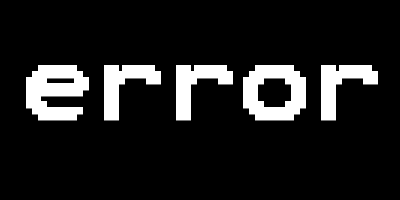
<style>
.page{position:relative;width:400px;height:200px;background:#000000}
.page>*{position:absolute;margin:0}
.t1{font:96px "Terminal";color:#ffffff;font-weight:bold}
</style>
<div class="page">
<p class="t1" style="left:26px;top:65px;width:352px;height:56px">error</p>
</div>
